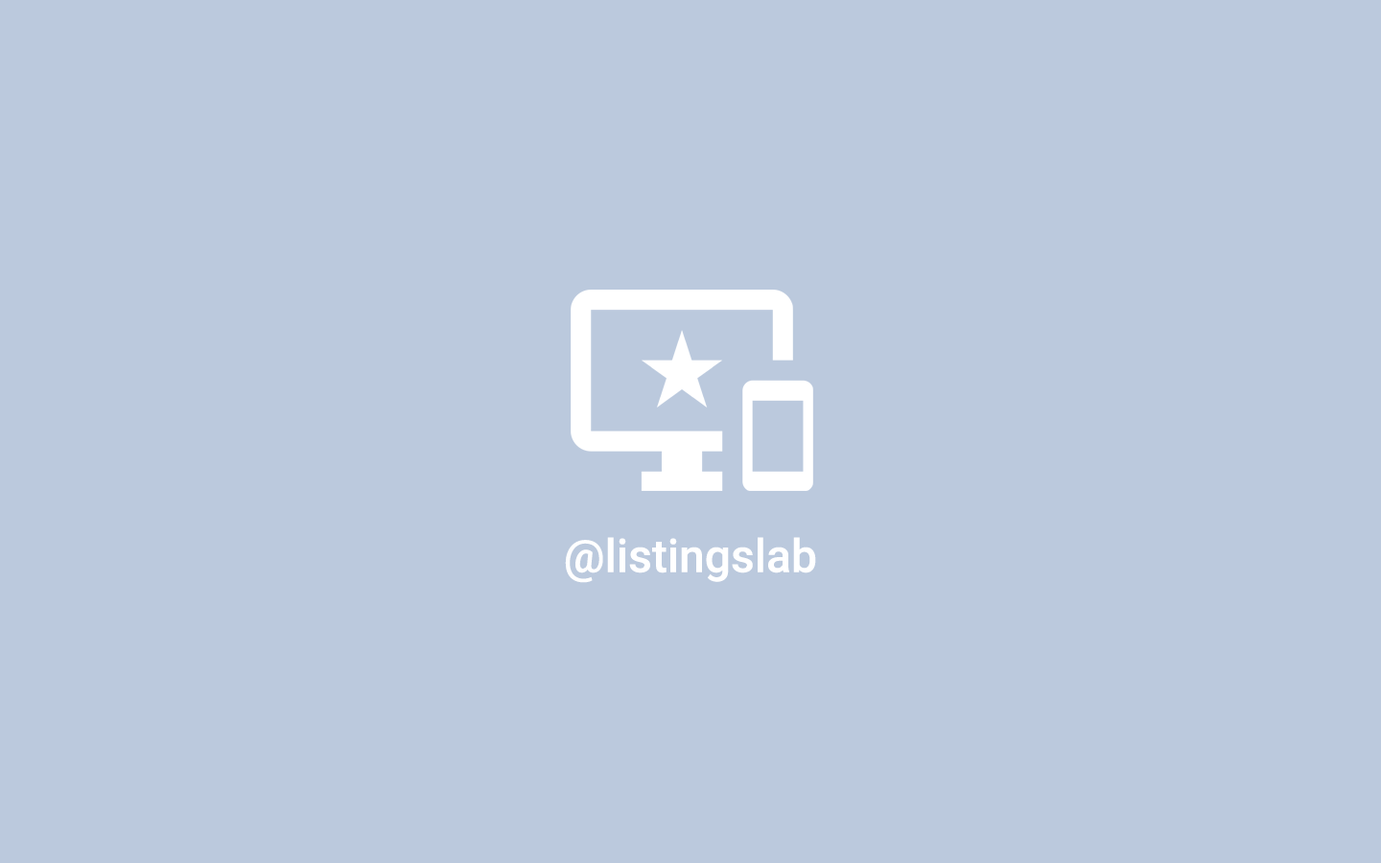
<style>
.page{position:relative;width:1381px;height:863px;background:#bbc9dd}
.page>*{position:absolute;margin:0}
.t1{font:46px "Roboto-Medium";color:#ffffff}
</style>
<div class="page">
<p class="t1" style="left:565px;top:537px;width:251px;height:46px">@listingslab</p>
</div>
